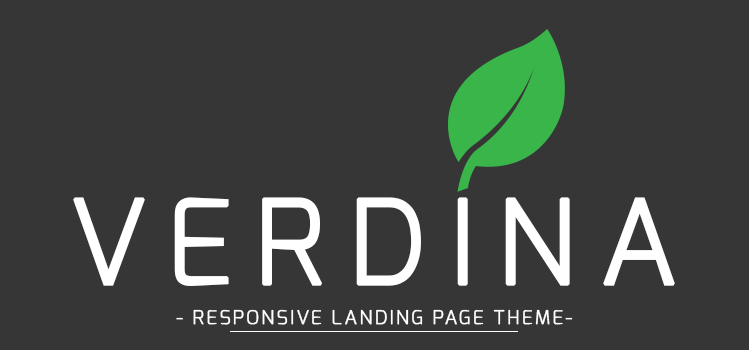
<style>
.page{position:relative;width:749px;height:350px;background:#363636}
.page>*{position:absolute;margin:0}
.t1{font:116px "Exo-Light";letter-spacing:0.18em;color:#ffffff;font-weight:bold}
.t2{font:19px "Exo-Light";letter-spacing:0.1em;color:#ffffff;font-weight:bold}
</style>
<div class="page">
<p class="t1" style="left:73px;top:197px;width:602px;height:89px">VERDINA</p>
<p class="t2" style="left:176px;top:309px;width:397px;height:16px">- RESPONSIVE LANDING PAGE THEME-</p>
</div>
